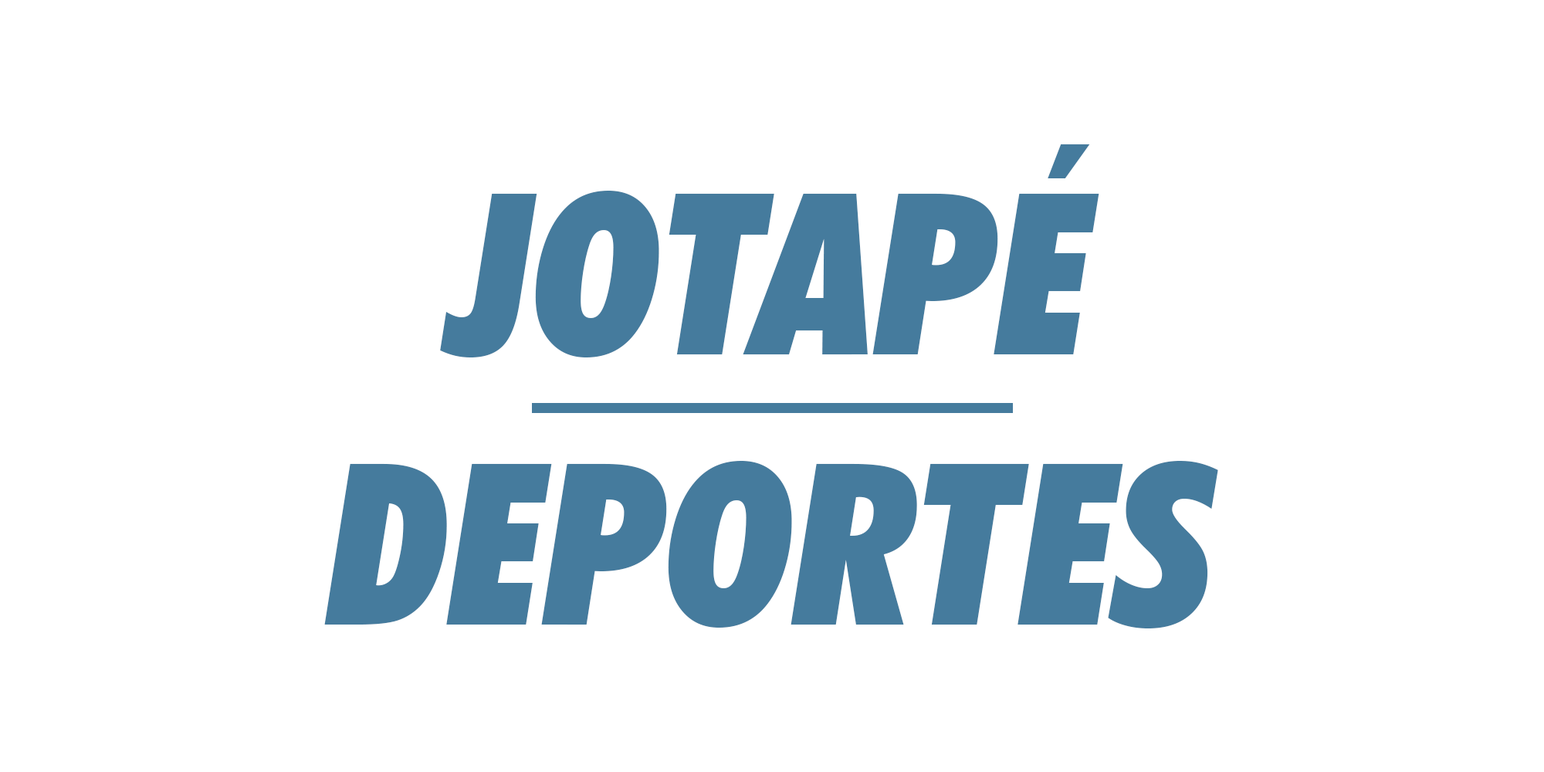
<style>
.page{position:relative;width:1544px;height:772px;background:#ffffff}
.page>*{position:absolute;margin:0}
.t1{font:225.2px "FuturaBT-ExtraBlackCondItalic";color:#457b9d}
</style>
<div class="page">
<p class="t1" style="left:324px;top:144px;width:894px;height:485px;text-align:center">JOTAPÉ<br>DEPORTES</p>
</div>
